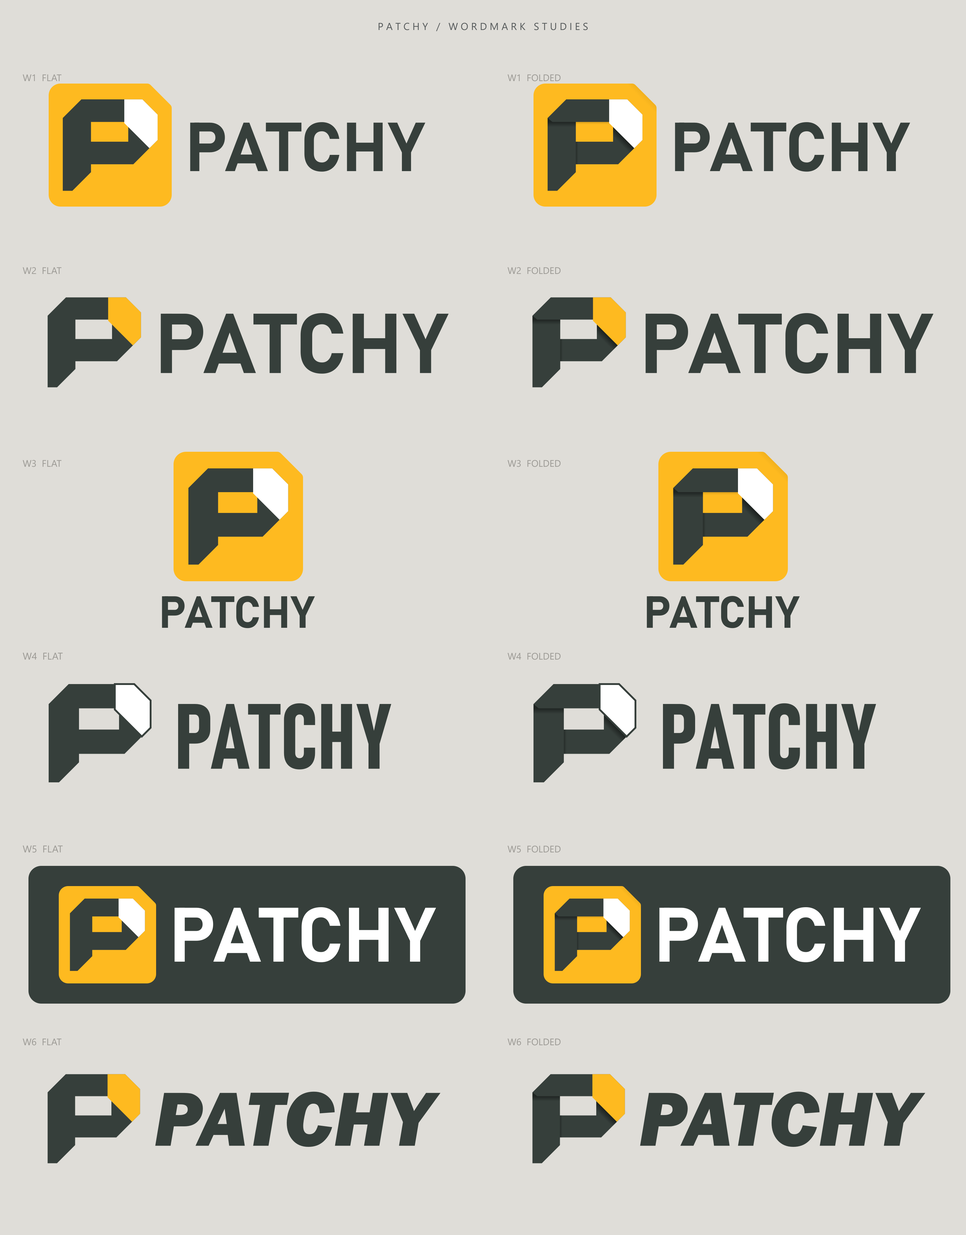
<style>
.page{position:relative;width:966px;height:1235px;background:#dfddd8}
.page>*{position:absolute;margin:0}
.t1{font:10px "SegoeUI";color:#55595a}
.t2{font:9.6px "SegoeUI";color:#9b9994}
.t3{font:9.5px "SegoeUI";color:#9b9994}
.t4{font:68.4px "Bahnschrift-Bold";color:#363f3b}
.t5{font:83.6px "Bahnschrift-Bold";color:#363f3b}
.t6{font:44.3px "Bahnschrift-Bold";color:#363f3b}
.t7{font:9.8px "SegoeUI";color:#9b9994}
.t8{font:91.2px "Bahnschrift-Bold-Condensed";color:#363f3b}
.t9{font:9.7px "SegoeUI";color:#9b9994}
.t10{font:76px "Bahnschrift-Bold";color:#ffffff}
.t11{font:79.3px "FranklinGothic-HeavyItalic";color:#363f3b}
</style>
<div class="page">
<p class="t1" style="left:378px;top:19px;width:211px;height:14px">P A T C H Y   /   W O R D M A R K   S T U D I E S</p>
<p class="t2" style="left:23px;top:71px;width:39px;height:13px">W1  FLAT</p>
<p class="t3" style="left:507px;top:71px;width:55px;height:13px">W1  FOLDED</p>
<p class="t4" style="left:185px;top:117px;width:241px;height:83px">PATCHY</p>
<p class="t4" style="left:670px;top:117px;width:241px;height:83px">PATCHY</p>
<p class="t2" style="left:23px;top:264px;width:39px;height:13px">W2  FLAT</p>
<p class="t3" style="left:507px;top:264px;width:55px;height:13px">W2  FOLDED</p>
<p class="t5" style="left:154px;top:307px;width:295px;height:101px">PATCHY</p>
<p class="t5" style="left:639px;top:307px;width:295px;height:101px">PATCHY</p>
<p class="t3" style="left:23px;top:457px;width:39px;height:13px">W3  FLAT</p>
<p class="t3" style="left:507px;top:457px;width:55px;height:13px">W3  FOLDED</p>
<p class="t6" style="left:159px;top:592px;width:157px;height:55px">PATCHY</p>
<p class="t6" style="left:643px;top:592px;width:158px;height:55px">PATCHY</p>
<p class="t7" style="left:23px;top:649px;width:41px;height:13px">W4  FLAT</p>
<p class="t3" style="left:507px;top:649px;width:55px;height:14px">W4  FOLDED</p>
<p class="t8" style="left:174px;top:696px;width:218px;height:110px">PATCHY</p>
<p class="t8" style="left:659px;top:696px;width:218px;height:110px">PATCHY</p>
<p class="t9" style="left:23px;top:842px;width:41px;height:13px">W5  FLAT</p>
<p class="t3" style="left:507px;top:842px;width:55px;height:14px">W5  FOLDED</p>
<p class="t10" style="left:169px;top:901px;width:268px;height:92px">PATCHY</p>
<p class="t10" style="left:653px;top:901px;width:268px;height:92px">PATCHY</p>
<p class="t3" style="left:23px;top:1035px;width:39px;height:13px">W6  FLAT</p>
<p class="t3" style="left:507px;top:1035px;width:55px;height:13px">W6  FOLDED</p>
<p class="t11" style="left:154px;top:1073px;width:287px;height:90px">PATCHY</p>
<p class="t11" style="left:639px;top:1073px;width:287px;height:90px">PATCHY</p>
</div>
